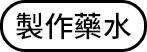
<style>
.page{position:relative;width:147px;height:52px;background:#ffffff}
.page>*{position:absolute;margin:0}
.t1{font:29.2px "NotoSansCJKtc-Medium";color:#060606}
</style>
<div class="page">
<p class="t1" style="left:16px;top:12px;width:115px;height:28px">製作藥水</p>
</div>
